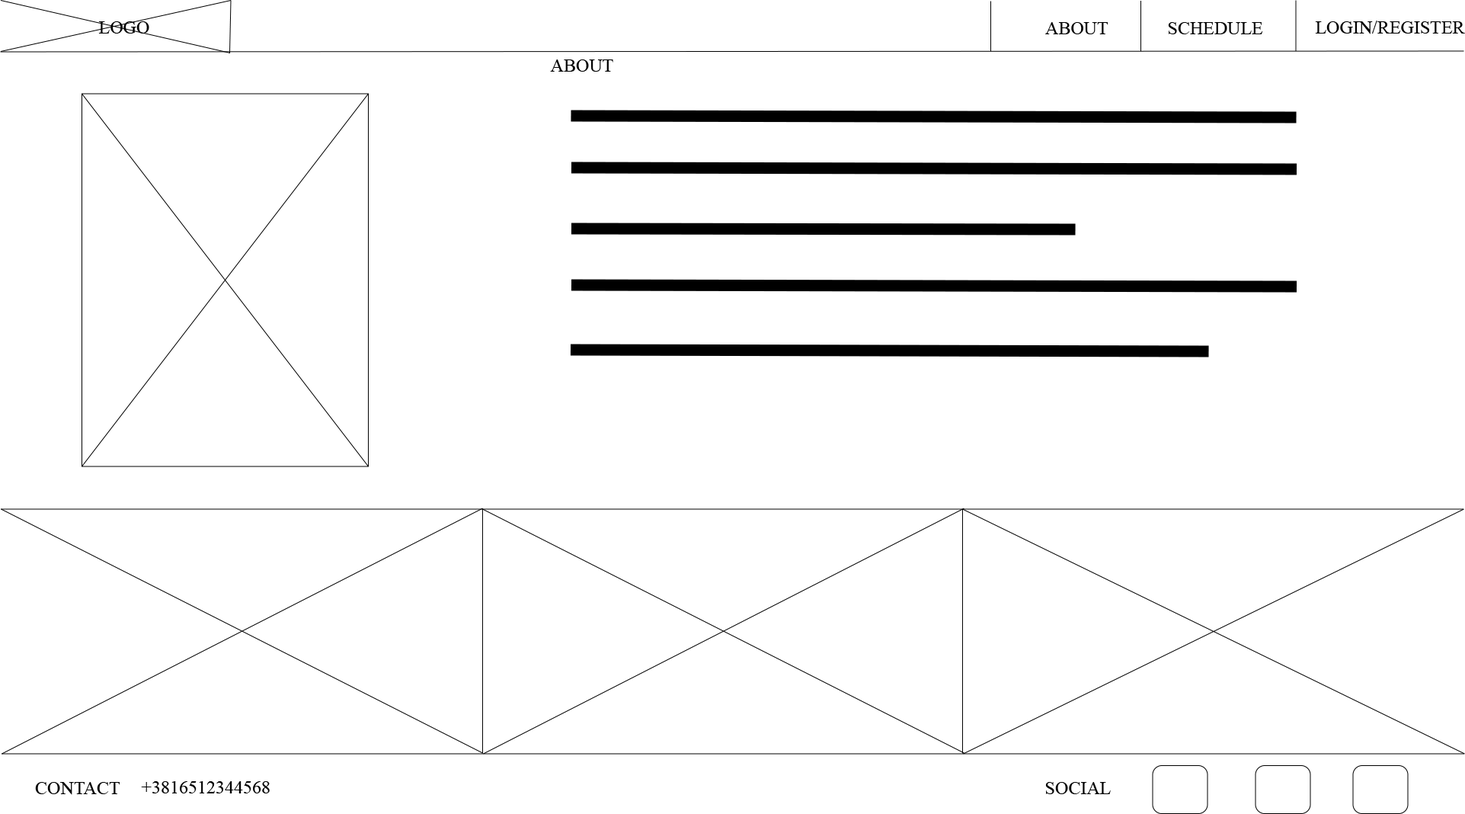
<style>
.page{position:relative;width:1465px;height:814px;background:#ffffff}
.page>*{position:absolute;margin:0}
.t1{font:18.3px "MyriadPro-Regular";color:#000000}
</style>
<div class="page">
<p class="t1" style="left:98px;top:21px;width:51px;height:13px">LOGO</p>
<p class="t1" style="left:1045px;top:22px;width:64px;height:12px">ABOUT</p>
<p class="t1" style="left:1168px;top:22px;width:95px;height:12px">SCHEDULE</p>
<p class="t1" style="left:1315px;top:21px;width:150px;height:13px">LOGIN/REGISTER</p>
<p class="t1" style="left:550px;top:59px;width:63px;height:13px">ABOUT</p>
<p class="t1" style="left:35px;top:782px;width:85px;height:13px">CONTACT</p>
<p class="t1" style="left:141px;top:781px;width:129px;height:12px">+3816512344568</p>
<p class="t1" style="left:1045px;top:782px;width:66px;height:12px">SOCIAL</p>
</div>
